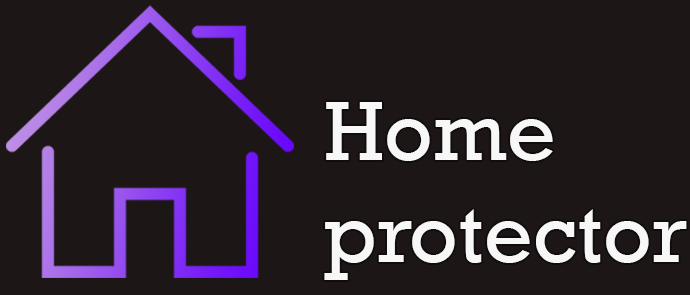
<style>
.page{position:relative;width:690px;height:295px;background:#1c1616}
.page>*{position:absolute;margin:0}
.t1{font:85.3px "Rockwell";color:#ffffff}
</style>
<div class="page">
<p class="t1" style="left:324px;top:102px;width:363px;height:178px;text-align:right">Home<br>protector</p>
</div>
